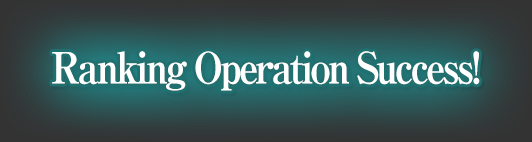
<style>
.page{position:relative;width:532px;height:142px}
.page>*{position:absolute;margin:0}
.t1{font:43px "RyuminPro-ExBold";letter-spacing:-0.08em;color:#ffffff;scale:0.9 1}
</style>
<div class="page">
<p class="t1" style="left:52px;top:51px;width:428px;height:40px">Ranking Operation Success!</p>
</div>
